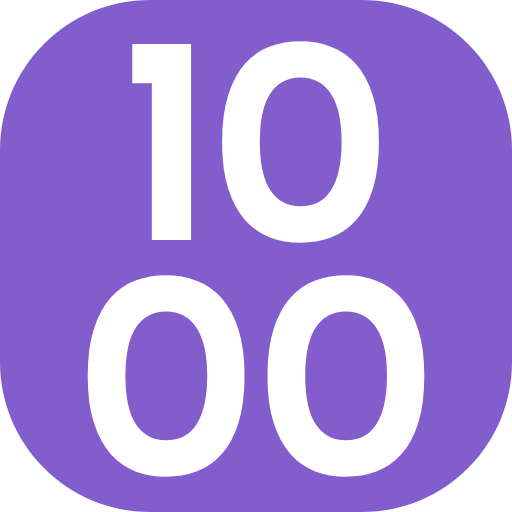
<style>
.page{position:relative;width:512px;height:512px;background:#835dcc}
.page>*{position:absolute;margin:0}
.t1{font:280px "Righteous-Regular";color:#ffffff}
</style>
<div class="page">
<p class="t1" style="left:132px;top:41px;width:247px;height:202px">10</p>
<p class="t1" style="left:87px;top:275px;width:338px;height:202px">00</p>
</div>
